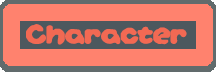
<style>
.page{position:relative;width:216px;height:72px;background:#ff826e}
.page>*{position:absolute;margin:0}
.t1{font:29px "Yoshi'sStorygametextBRK";color:#f26953}
</style>
<div class="page">
<p class="t1" style="left:26px;top:24px;width:161px;height:21px">Character</p>
<p class="t1" style="left:26px;top:24px;width:161px;height:21px">Character</p>
</div>
